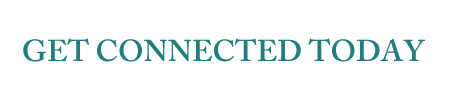
<style>
.page{position:relative;width:450px;height:107px;background:#ffffff}
.page>*{position:absolute;margin:0}
.t1{font:30px "ACaslonPro-Semibold";color:#1f7e7e;text-transform:uppercase}
</style>
<div class="page">
<p class="t1" style="left:23px;top:38px;width:402px;height:24px">Get connected today</p>
</div>
